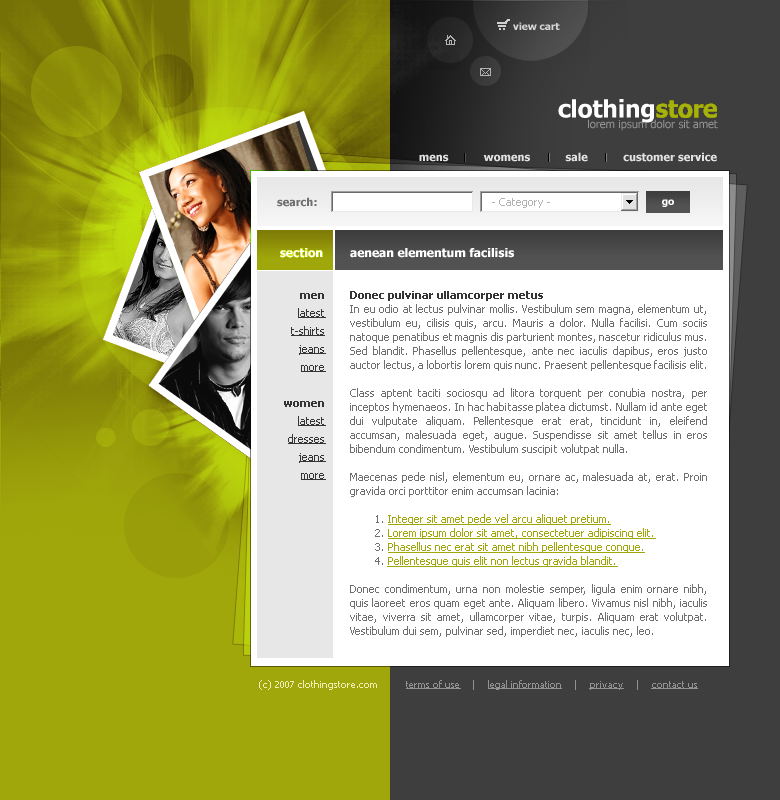
<style>
.page{position:relative;width:780px;height:800px;background:#ffffff}
.page>*{position:absolute;margin:0}
.t1{font:10px "Tahoma-Bold";color:#d5d5d5}
.t2{font:24px "Tahoma-Bold";color:#ffffff}
.t3{font:24px "Tahoma-Bold";color:#c20000}
.t4{font:11px "Tahoma";color:#949494}
.t5{font:11px "Tahoma-Bold";color:#e2e2e2}
.t6{font:11px "Tahoma-Bold";color:#6f6f6f}
.t7{font:11px "Tahoma";color:#b2b2b2}
.t8{font:10px "Tahoma-Bold";color:#ffffff}
.t9{font:12px "Tahoma-Bold";color:#ffffff}
.t10{font:11px/18px "Tahoma";color:#343434;text-decoration:underline}
.t11{font:11px/18px "Tahoma-Bold";color:#343434}
.t12{font:11px/14px "Tahoma";color:#6f6f6f}
.t13{font:11px/14px "Tahoma-Bold";color:#343434}
.t14{font:11px/14px "Tahoma";color:#b60000;text-decoration:underline}
.t15{font:10px "Tahoma";color:#f0edb5}
.t16{font:10px "Tahoma";color:#929292;text-decoration:underline}
.t17{font:10px "Tahoma";color:#929292}
</style>
<div class="page">
<p class="t1" style="left:513px;top:22px;width:47px;height:8px">view cart</p>
<p class="t2" style="left:558px;top:99px;width:159px;height:24px">clothing<span class="t3">store</span></p>
<p class="t4" style="left:588px;top:119px;width:130px;height:12px">lorem ipsum dolor sit amet</p>
<p class="t5" style="left:419px;top:152px;width:298px;height:10px">mens           womens           sale           customer service</p>
<p class="t6" style="left:277px;top:197px;width:40px;height:10px">search:</p>
<p class="t7" style="left:492px;top:198px;width:58px;height:10px">- Category -</p>
<p class="t8" style="left:662px;top:199px;width:12px;height:8px">go</p>
<p class="t9" style="left:280px;top:248px;width:43px;height:10px">section</p>
<p class="t9" style="left:350px;top:248px;width:164px;height:10px">aenean elementum facilisis</p>
<p class="t10" style="left:284px;top:293px;width:42px;height:187px;text-align:right"><span class="t11">men<br></span>latest<br>t-shirts<br>jeans<br>more<br><br><span class="t11">women<br></span>latest<br>dresses<br>jeans<br>more</p>
<p class="t12" style="left:350px;top:291px;width:357px;height:346px;text-align:justify"><span class="t13">Donec pulvinar ullamcorper metus</span><br>In eu odio at lectus pulvinar mollis. Vestibulum sem magna, elementum ut, vestibulum eu, cilisis quis, arcu. Mauris a dolor. Nulla facilisi. Cum sociis natoque penatibus et magnis dis parturient montes, nascetur ridiculus mus. Sed blandit. Phasellus pellentesque, ante nec iaculis dapibus, eros justo auctor lectus, a lobortis lorem quis nunc. Praesent pellentesque facilisis elit. <br><br>Class aptent taciti sociosqu ad litora torquent per conubia nostra, per inceptos hymenaeos. In hac habitasse platea dictumst. Nullam id ante eget dui vulputate aliquam. Pellentesque erat erat, tincidunt in, eleifend accumsan, malesuada eget, augue. Suspendisse sit amet tellus in eros bibendum condimentum. Vestibulum suscipit volutpat nulla.<br><br>Maecenas pede nisl, elementum eu, ornare ac, malesuada at, erat. Proin gravida orci porttitor enim accumsan lacinia:<br><br>1. <span class="t14">Integer sit amet pede vel arcu aliquet pretium.<br></span>2. <span class="t14">Lorem ipsum dolor sit amet, consectetuer adipiscing elit.<br></span>3. <span class="t14">Phasellus nec erat sit amet nibh pellentesque congue.<br></span>4. <span class="t14">Pellentesque quis elit non lectus gravida blandit.<br></span><br>Donec condimentum, urna non molestie semper, ligula enim ornare nibh, quis laoreet eros quam eget ante. Aliquam libero. Vivamus nisl nibh, iaculis vitae, viverra sit amet, ullamcorper vitae, turpis. Aliquam erat volutpat. Vestibulum dui sem, pulvinar sed, imperdiet nec, iaculis nec, leo.</p>
<p class="t15" style="left:259px;top:680px;width:118px;height:10px">(c) 2007 clothingstore.com</p>
<p class="t16" style="left:406px;top:680px;width:292px;height:10px">terms of use<span class="t17">    |    </span>legal information<span class="t17">    |    </span>privacy<span class="t17">    |    </span>contact us</p>
</div>
